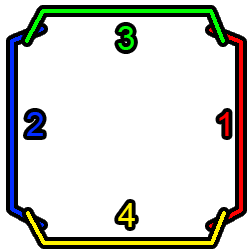
<style>
.page{position:relative;width:250px;height:250px;background:#ffffff}
.page>*{position:absolute;margin:0}
.t1{font:33px "ArialMT";color:#03ff03}
.t2{font:33px "ArialMT";color:#032dff}
.t3{font:33px "ArialMT";color:#ff0000}
.t4{font:33px "ArialMT";color:#fff302}
</style>
<div class="page">
<p class="t1" style="left:118px;top:26px;width:16px;height:24px">3</p>
<p class="t2" style="left:27px;top:112px;width:16px;height:24px">2</p>
<p class="t3" style="left:219px;top:112px;width:10px;height:24px">1</p>
<p class="t4" style="left:118px;top:203px;width:17px;height:24px">4</p>
</div>
